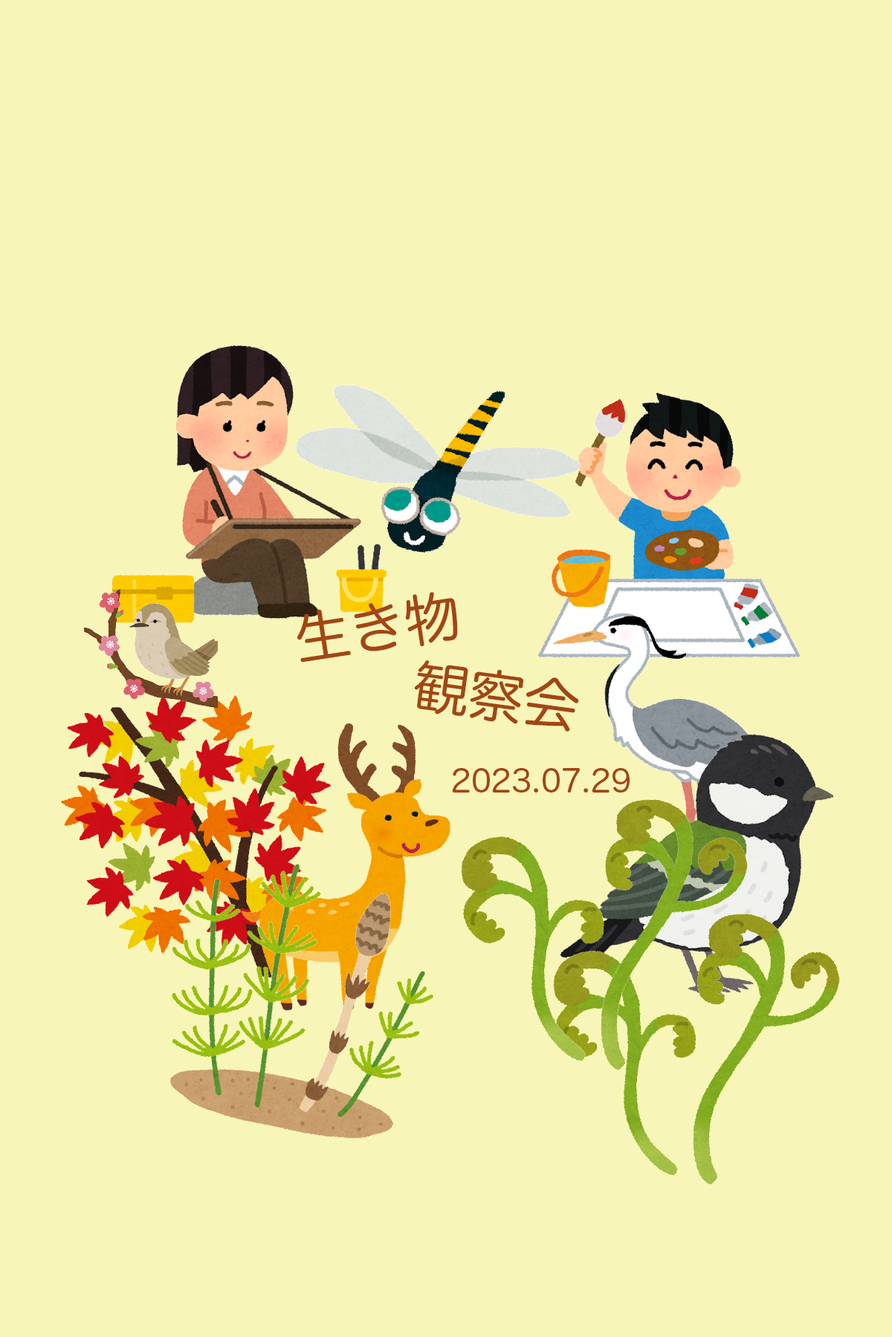
<style>
.page{position:relative;width:892px;height:1337px;background:#f8f5b8}
.page>*{position:absolute;margin:0}
.t1{font:55.7px "HiraMaruProN-W4";color:#a24614}
.t2{font:31px "HiraMaruProN-W4";color:#a24614}
</style>
<div class="page">
<p class="t1" style="left:296px;top:592px;width:162px;height:71px;rotate:-9deg">生き物</p>
<p class="t1" style="left:414px;top:661px;width:165px;height:71px;rotate:8deg">観察会</p>
<p class="t2" style="left:452px;top:768px;width:177px;height:25px">2023.07.29</p>
</div>
